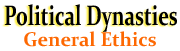
<style>
.page{position:relative;width:180px;height:51px;background:#ffffff}
.page>*{position:absolute;margin:0}
.t1{font:28.3px "Constantia-Bold";color:#000000;scale:0.69 1}
.t2{font:19.9px "Constantia-Bold";color:#fd6802}
</style>
<div class="page">
<p class="t1" style="left:4px;top:4px;width:173px;height:28px">Political Dynasties</p>
<p class="t2" style="left:24px;top:31px;width:132px;height:16px">General Ethics</p>
</div>
